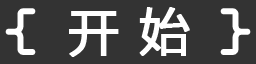
<style>
.page{position:relative;width:256px;height:64px;background:#333333}
.page>*{position:absolute;margin:0}
.t1{font:50px "MicrosoftYaHei";letter-spacing:0.4em;color:#ffffff;font-weight:bold}
</style>
<div class="page">
<p class="t1" style="left:69px;top:7px;width:121px;height:50px">开始</p>
</div>
